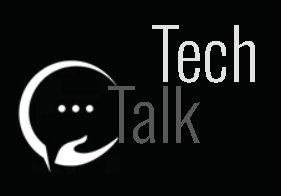
<style>
.page{position:relative;width:281px;height:196px;background:#030505}
.page>*{position:absolute;margin:0}
.t1{font:70px "Oswald-Light";color:#e2e2e2}
.t2{font:70px "Oswald-Light";color:#575757}
</style>
<div class="page">
<p class="t1" style="left:152px;top:25px;width:103px;height:58px">Tech</p>
<p class="t2" style="left:108px;top:86px;width:92px;height:58px">Talk</p>
</div>
